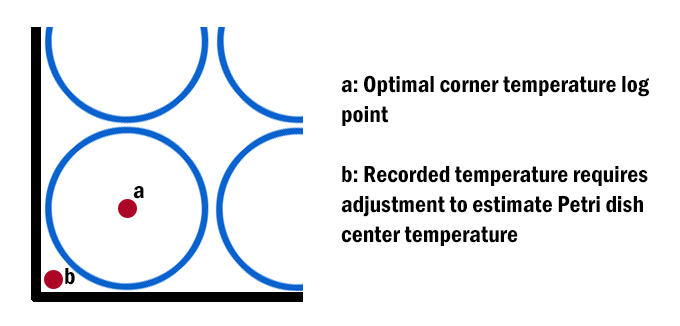
<style>
.page{position:relative;width:680px;height:326px;background:#ffffff}
.page>*{position:absolute;margin:0}
.t1{font:24px/30px "FranklinGothic-DemiCond";color:#000000}
.t2{font:24px "FranklinGothic-DemiCond";color:#000000}
</style>
<div class="page">
<p class="t1" style="left:341px;top:75px;width:308px;height:171px">a: Optimal corner temperature log point<br><br>b: Recorded temperature requires adjustment to estimate Petri dish center temperature</p>
<p class="t2" style="left:133px;top:186px;width:11px;height:13px">a</p>
<p class="t2" style="left:65px;top:268px;width:10px;height:17px">b</p>
</div>
